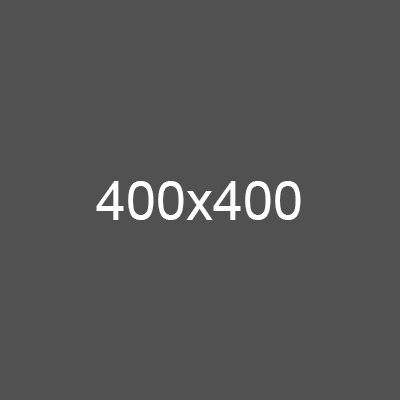
<style>
.page{position:relative;width:400px;height:400px;background:#515151}
.page>*{position:absolute;margin:0}
.t1{font:54px "ArialMT";color:#ffffff}
</style>
<div class="page">
<p class="t1" style="left:96px;top:181px;width:205px;height:39px">400x400</p>
</div>
